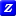
<style>
.page{position:relative;width:16px;height:16px}
.page>*{position:absolute;margin:0}
.t1{font:12px "BookmanOldStyle-BoldItalic";color:#ffffff}
</style>
<div class="page">
<p class="t1" style="left:4px;top:4px;width:9px;height:8px">Z</p>
</div>
